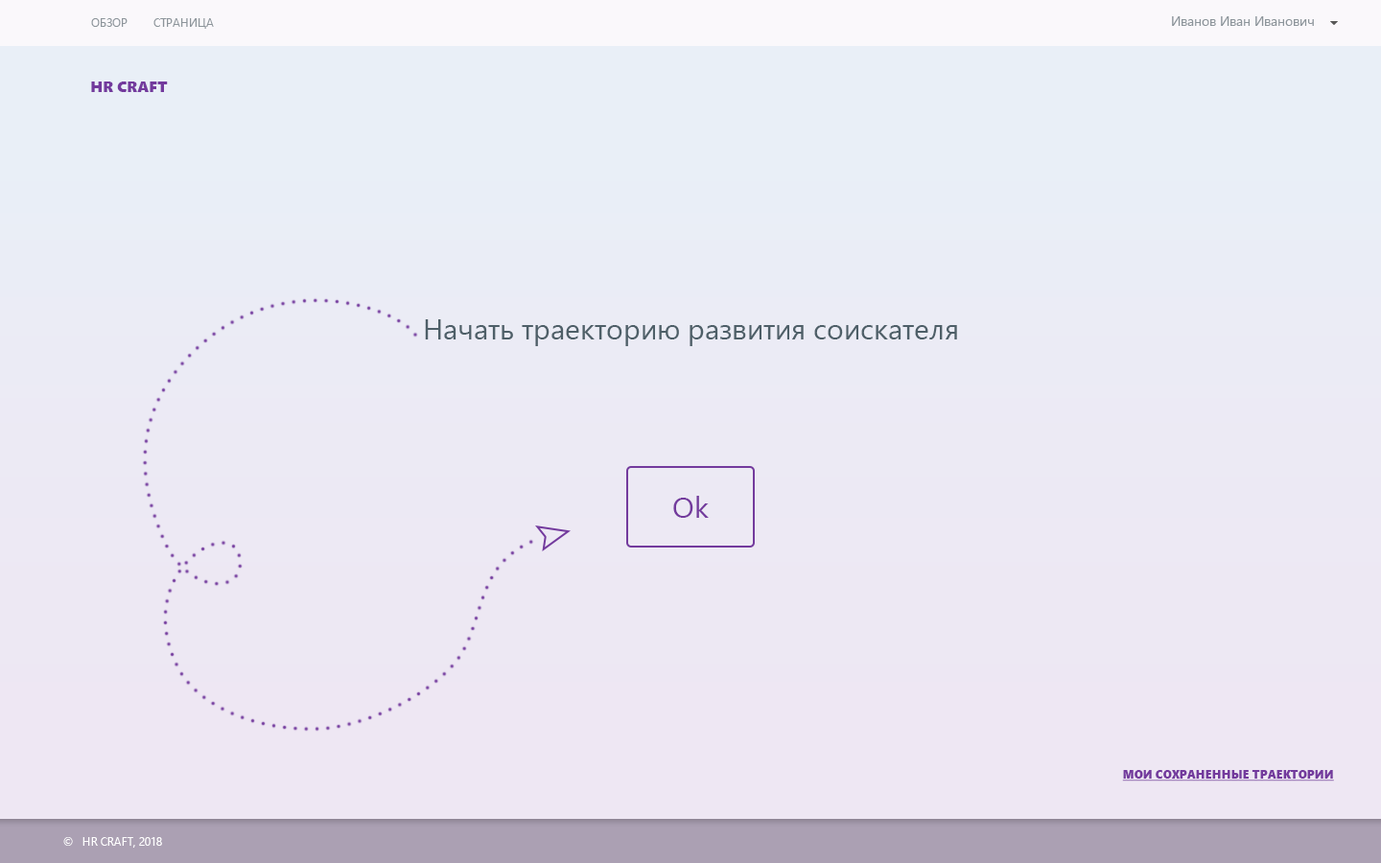
<style>
.page{position:relative;width:1381px;height:863px}
.page>*{position:absolute;margin:0}
.t1{font:13.4px "SegoeUI";color:#8d959b}
.t2{font:11.5px "SegoeUI";color:#8d959b}
.t3{font:15.3px "SegoeUIBlack";color:#733a9d;text-transform:uppercase}
.t4{font:28.8px "SegoeUI";color:#4e5f68}
.t5{font:28.8px "SegoeUI";color:#733a9d}
.t6{font:11.5px "SegoeUIBlack";color:#733a9d;text-transform:uppercase;text-decoration:underline}
.t7{font:11.5px "SegoeUI";color:#ffffff;text-transform:uppercase}
</style>
<div class="page">
<p class="t1" style="left:1172px;top:16px;width:142px;height:10px">Иванов Иван Иванович</p>
<p class="t2" style="left:91px;top:18px;width:123px;height:11px">ОБЗОР         СТРАНИЦА</p>
<p class="t3" style="left:91px;top:82px;width:77px;height:10px">HR CRAFT</p>
<p class="t4" style="left:425px;top:319px;width:532px;height:27px">Начать траекторию развития соискателя</p>
<p class="t5" style="left:673px;top:496px;width:36px;height:22px">Ok</p>
<p class="t6" style="left:1122px;top:770px;width:212px;height:12px">Мои сохраненные траектории</p>
<p class="t7" style="left:63px;top:837px;width:99px;height:11px">©   hr craft, 2018</p>
</div>
